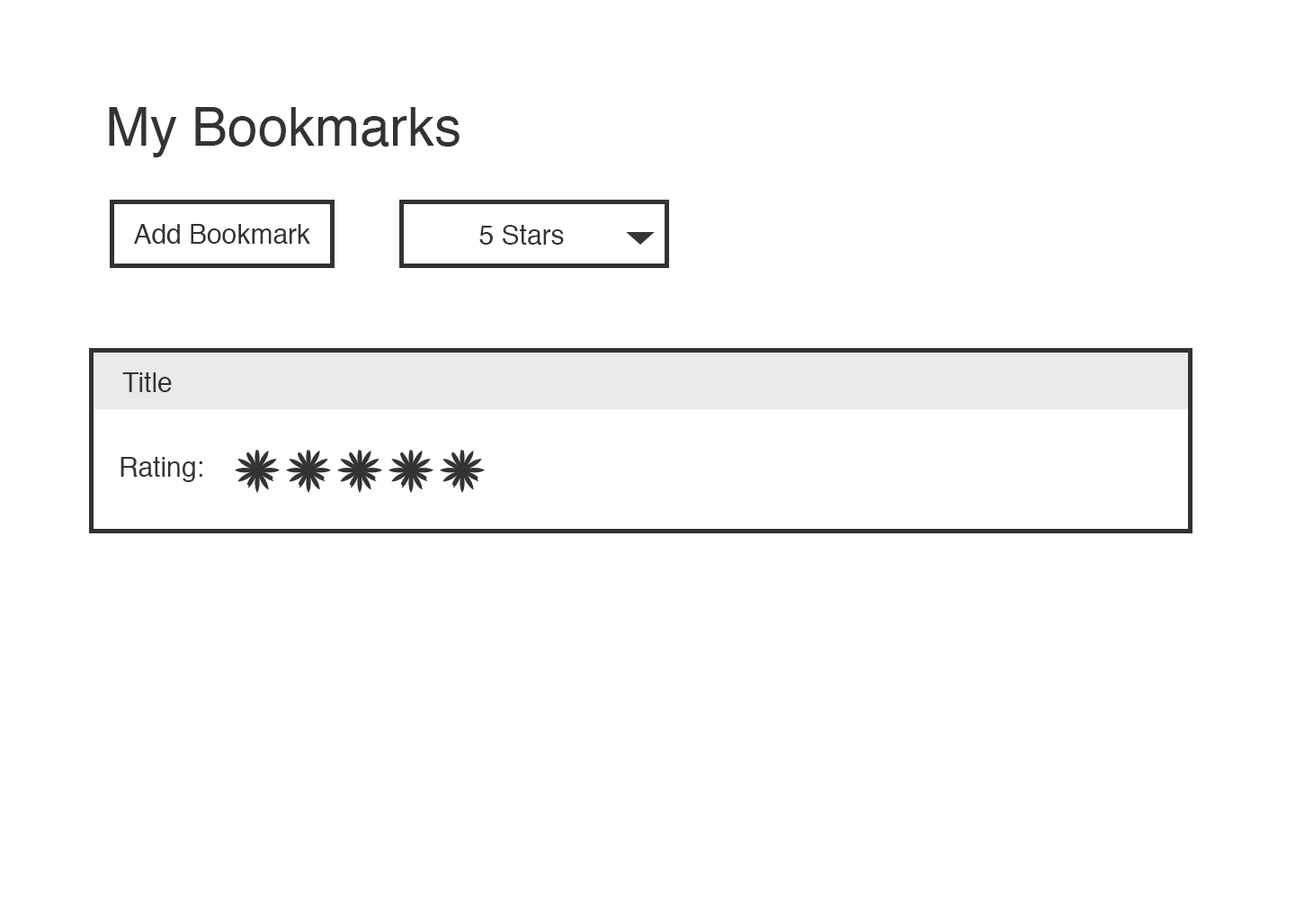
<style>
.page{position:relative;width:1295px;height:921px;background:#ffffff}
.page>*{position:absolute;margin:0}
.t1{font:54px "Helvetica";color:#333333}
.t2{font:27px "Helvetica";color:#333333}
</style>
<div class="page">
<p class="t1" style="left:109px;top:107px;width:351px;height:50px">My Bookmarks</p>
<p class="t2" style="left:134px;top:224px;width:176px;height:20px">Add Bookmark</p>
<p class="t2" style="left:479px;top:225px;width:85px;height:20px">5 Stars</p>
<p class="t2" style="left:122px;top:372px;width:50px;height:20px">Title</p>
<p class="t2" style="left:121px;top:457px;width:81px;height:25px">Rating:</p>
</div>
